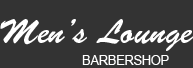
<style>
.page{position:relative;width:193px;height:68px;background:#333333}
.page>*{position:absolute;margin:0}
.t1{font:33.3px "BrushScriptStd";color:#ffffff}
.t2{font:12.5px "ArialMT";color:#ffffff}
</style>
<div class="page">
<p class="t1" style="left:0px;top:19px;width:194px;height:32px">Men’s Lounge</p>
<p class="t2" style="left:82px;top:55px;width:87px;height:10px">BARBERSHOP</p>
</div>
